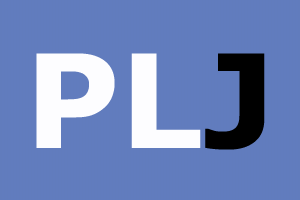
<style>
.page{position:relative;width:300px;height:200px;background:#617cbe}
.page>*{position:absolute;margin:0}
.t1{font:130px "Verdana-Bold";color:#fefeff}
.t2{font:130px "Verdana-Bold";color:#000000}
</style>
<div class="page">
<p class="t1" style="left:36px;top:53px;width:229px;height:97px">PL<span class="t2">J</span></p>
</div>
